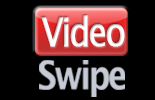
<style>
.page{position:relative;width:155px;height:100px;background:#000000}
.page>*{position:absolute;margin:0}
.t1{font:39.8px "LucidaGrande";letter-spacing:-0.075em;color:#ffffff;font-weight:bold;scale:0.83 1}
.t2{font:39.8px "LucidaGrande-Bold";letter-spacing:-0.075em;color:#c6cad5;scale:0.83 1}
</style>
<div class="page">
<p class="t1" style="left:41px;top:15px;width:84px;height:32px">Video</p>
<p class="t2" style="left:39px;top:60px;width:86px;height:37px">Swipe</p>
</div>
